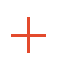
<style>
.page{position:relative;width:64px;height:76px;background:#ffffff}
.page>*{position:absolute;margin:0}
.t1{font:100px "Existence-Light";color:#e34a2d}
</style>
<div class="page">
<p class="t1" style="left:11px;top:17px;width:35px;height:36px">+</p>
</div>
